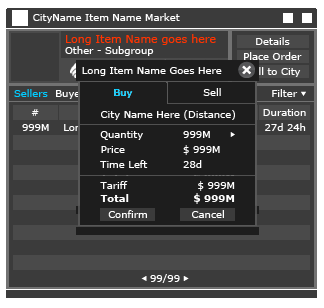
<style>
.page{position:relative;width:324px;height:308px;background:#3b3b3b}
.page>*{position:absolute;margin:0}
.t1{font:10px "Verdana";color:#ffffff}
.t2{font:11px "Verdana";color:#ff3300}
.t3{font:10px "Verdana";color:#00ccff}
.t4{font:10px "Verdana";color:#fefefe}
.t5{font:10px "Verdana"}
.t6{font:10px "Verdana-Bold";color:#fefefe}
.t7{font:10px "Verdana-Bold";color:#ffffff}
</style>
<div class="page">
<p class="t1" style="left:33px;top:13px;width:147px;height:10px">CityName Item Name Market</p>
<p class="t2" style="left:66px;top:34px;width:150px;height:11px">Long Item Name goes here</p>
<p class="t1" style="left:256px;top:37px;width:34px;height:8px">Details</p>
<p class="t1" style="left:65px;top:46px;width:89px;height:10px">Other - Subgroup</p>
<p class="t1" style="left:244px;top:52px;width:58px;height:8px">Place Order</p>
<p class="t1" style="left:82px;top:67px;width:140px;height:9px">Long Item Name Goes Here</p>
<p class="t1" style="left:246px;top:67px;width:55px;height:10px">Sell to City</p>
<p class="t3" style="left:14px;top:89px;width:34px;height:8px">Sellers</p>
<p class="t3" style="left:114px;top:89px;width:19px;height:9px">Buy</p>
<p class="t3" style="left:114px;top:89px;width:19px;height:9px">Buy</p>
<p class="t1" style="left:203px;top:88px;width:18px;height:8px">Sell</p>
<p class="t4" style="left:272px;top:89px;width:26px;height:8px">Filter</p>
<p class="t1" style="left:56px;top:90px;width:34px;height:9px">Buyers</p>
<p class="t5" style="left:114px;top:90px;width:19px;height:9px">Buy</p>
<p class="t5" style="left:114px;top:90px;width:19px;height:9px">Buy</p>
<p class="t1" style="left:31px;top:109px;width:8px;height:7px">#</p>
<p class="t4" style="left:101px;top:110px;width:134px;height:10px">City Name Here (Distance)</p>
<p class="t1" style="left:263px;top:109px;width:43px;height:7px">Duration</p>
<p class="t1" style="left:22px;top:124px;width:27px;height:7px">999M</p>
<p class="t1" style="left:265px;top:123px;width:41px;height:8px">27d 24h</p>
<p class="t1" style="left:100px;top:131px;width:43px;height:9px">Quantity</p>
<p class="t1" style="left:183px;top:131px;width:27px;height:7px">999M</p>
<p class="t1" style="left:101px;top:146px;width:24px;height:7px">Price</p>
<p class="t1" style="left:183px;top:145px;width:37px;height:10px">$ 999M</p>
<p class="t5" style="left:100px;top:160px;width:28px;height:8px">Tariff</p>
<p class="t1" style="left:100px;top:160px;width:48px;height:8px">Time Left</p>
<p class="t1" style="left:183px;top:160px;width:19px;height:8px">28d</p>
<p class="t4" style="left:100px;top:181px;width:28px;height:8px">Tariff</p>
<p class="t1" style="left:198px;top:181px;width:37px;height:10px">$ 999M</p>
<p class="t6" style="left:100px;top:194px;width:29px;height:8px">Total</p>
<p class="t7" style="left:194px;top:193px;width:41px;height:11px">$ 999M</p>
<p class="t1" style="left:108px;top:210px;width:39px;height:8px">Confirm</p>
<p class="t1" style="left:192px;top:210px;width:32px;height:8px">Cancel</p>
<p class="t1" style="left:150px;top:274px;width:30px;height:9px">99/99</p>
</div>
